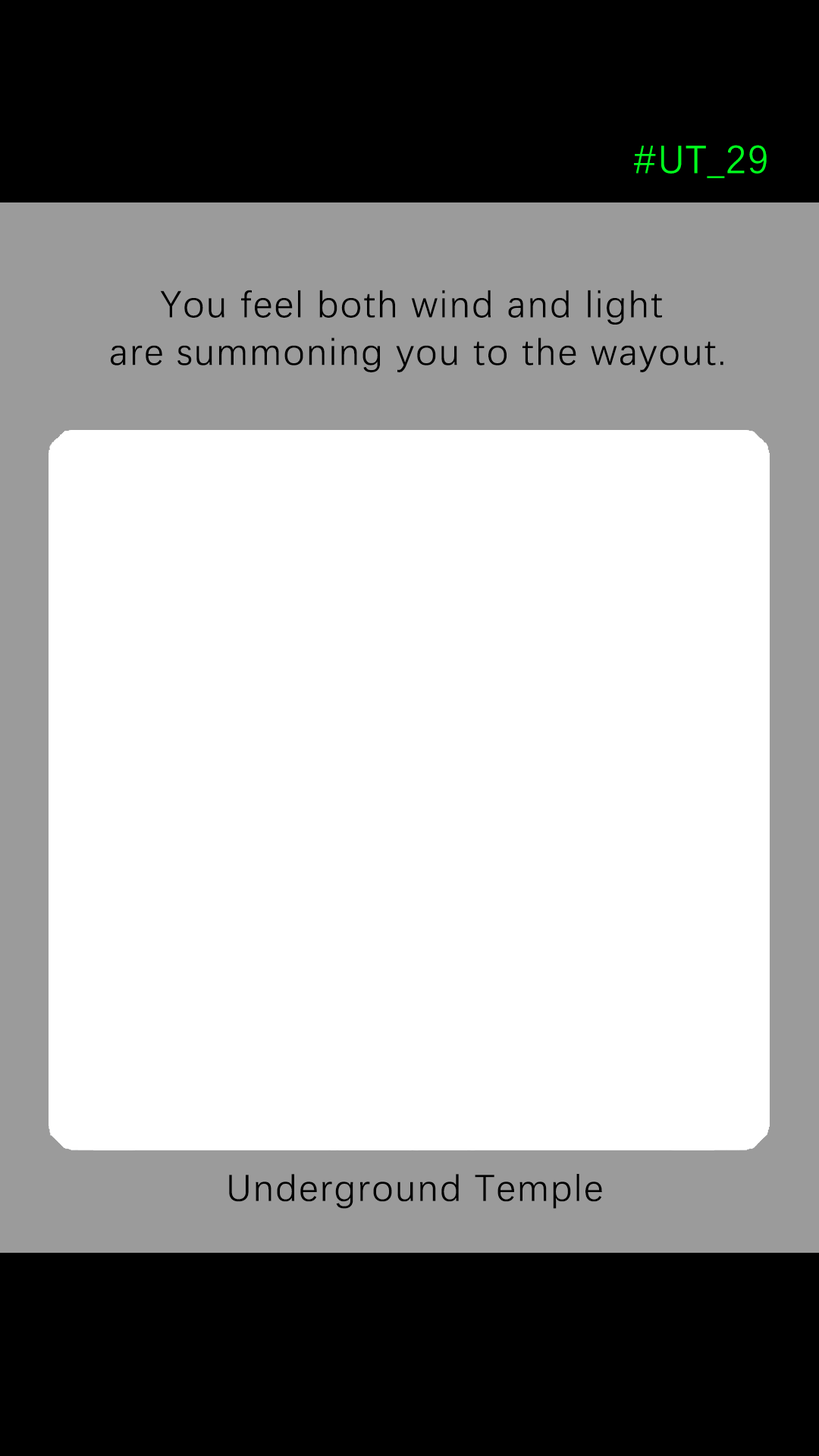
<style>
.page{position:relative;width:819px;height:1456px;background:#ffffff}
.page>*{position:absolute;margin:0}
.t1{font:39.2px "DengXian-Regular";letter-spacing:0.04em;color:#00ff1e}
.t2{font:37.9px/47.6px "DengXian-Regular";letter-spacing:0.04em;color:#000000}
.t3{font:37.9px "DengXian-Regular";letter-spacing:0.04em;color:#000000}
</style>
<div class="page">
<p class="t1" style="left:634px;top:145px;width:133px;height:33px">#UT_29</p>
<p class="t2" style="left:111px;top:290px;width:612px;height:82px;text-align:center">You feel both wind and light <br>are summoning you to the wayout.</p>
<p class="t3" style="left:229px;top:1174px;width:373px;height:35px">Underground Temple</p>
</div>
